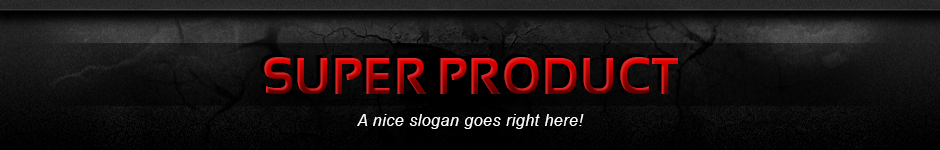
<style>
.page{position:relative;width:940px;height:150px}
.page>*{position:absolute;margin:0}
.t1{font:52px "Sansation-Bold";letter-spacing:0.025em;scale:0.94 1}
.t2{font:16.2px "Arial-ItalicMT";letter-spacing:0.025em;color:#ffffff}
</style>
<div class="page">
<p class="t1" style="left:264px;top:57px;width:414px;height:37px">SUPER PRODUCT</p>
<p class="t2" style="left:357px;top:114px;width:227px;height:15px">A nice slogan goes right here!</p>
</div>
